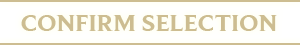
<style>
.page{position:relative;width:300px;height:45px}
.page>*{position:absolute;margin:0}
.t1{font:24.3px "BeaufortforLOL-Bold";color:#cdbe91;scale:1.06 1}
</style>
<div class="page">
<p class="t1" style="left:21px;top:15px;width:256px;height:16px">CONFIRM SELECTION</p>
</div>
